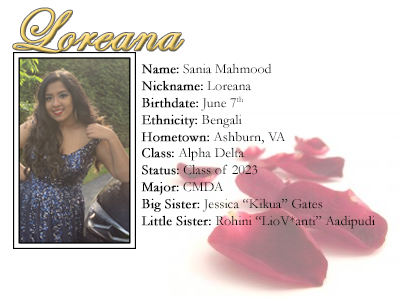
<style>
.page{position:relative;width:400px;height:300px;background:#ffffff}
.page>*{position:absolute;margin:0}
.t1{font:60px "EdwardianScriptITC";font-weight:bold}
.t2{font:14px "Garamond";color:#000000}
.t3{font:14px "Garamond";color:#000000;font-weight:bold}
</style>
<div class="page">
<p class="t1" style="left:13px;top:8px;width:171px;height:45px">Loreana</p>
<p class="t2" style="left:141px;top:63px;width:234px;height:166px"><span class="t3">Name:</span> Sania Mahmood<br><span class="t3">Nickname:</span> Loreana<br><span class="t3">Birthdate:</span> June 7th<br><span class="t3">Ethnicity:</span> Bengali<br><span class="t3">Hometown:</span> Ashburn, VA<br><span class="t3">Class:</span> Alpha Delta<br><span class="t3">Status:</span> Class of 2023<br><span class="t3">Major:</span> CMDA<br><span class="t3">Big Sister: </span>Jessica “Kikua” Gates<br><span class="t3">Little Sister: </span>Rohini “LioV*anti” Aadipudi</p>
</div>
